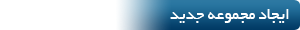
<style>
.page{position:relative;width:300px;height:30px;background:#ffffff}
.page>*{position:absolute;margin:0}
.t1{font:17.4px "BYekan";color:#ffffff}
</style>
<div class="page">
<p class="t1" style="left:170px;top:9px;width:119px;height:14px">ایجاد مجموعه جدید</p>
</div>
